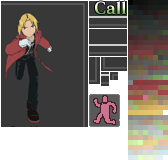
<style>
.page{position:relative;width:168px;height:160px;background:#383838}
.page>*{position:absolute;margin:0}
.t1{font:16px "MatissePro-B";letter-spacing:0.01em}
</style>
<div class="page">
<p class="t1" style="left:95px;top:1px;width:31px;height:13px">Call</p>
</div>
